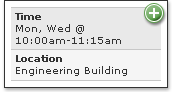
<style>
.page{position:relative;width:173px;height:92px;background:#e9e9e9}
.page>*{position:absolute;margin:0}
.t1{font:10px "Verdana";color:#333333}
.t2{font:10px "Verdana-Bold";color:#333333}
.t3{font:17px "Verdana-BoldItalic";color:#ffffff}
</style>
<div class="page">
<p class="t1" style="left:15px;top:13px;width:106px;height:31px"><span class="t2">Time<br></span>Mon, Wed @<br>10:00am-11:15am</p>
<p class="t3" style="left:149px;top:8px;width:10px;height:10px">+</p>
<p class="t1" style="left:16px;top:55px;width:111px;height:21px"><span class="t2">Location</span><br>Engineering Building</p>
</div>
